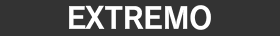
<style>
.page{position:relative;width:280px;height:36px;background:#333333}
.page>*{position:absolute;margin:0}
.t1{font:29.3px "RodinPro-B";letter-spacing:-0.02em;color:#ffffff}
</style>
<div class="page">
<p class="t1" style="left:69px;top:5px;width:142px;height:25px">EXTREMO</p>
</div>
